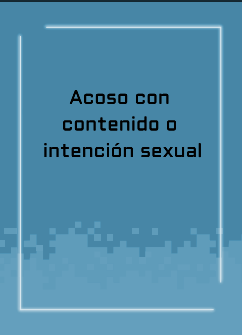
<style>
.page{position:relative;width:242px;height:335px;background:#4786a6}
.page>*{position:absolute;margin:0}
.t1{font:19.2px/26.7px "Aldrich-Regular";letter-spacing:0.005em;color:#000000}
</style>
<div class="page">
<p class="t1" style="left:44px;top:90px;width:157px;height:68px;text-align:center">Acoso con <br>contenido o <br>intención sexual</p>
</div>
